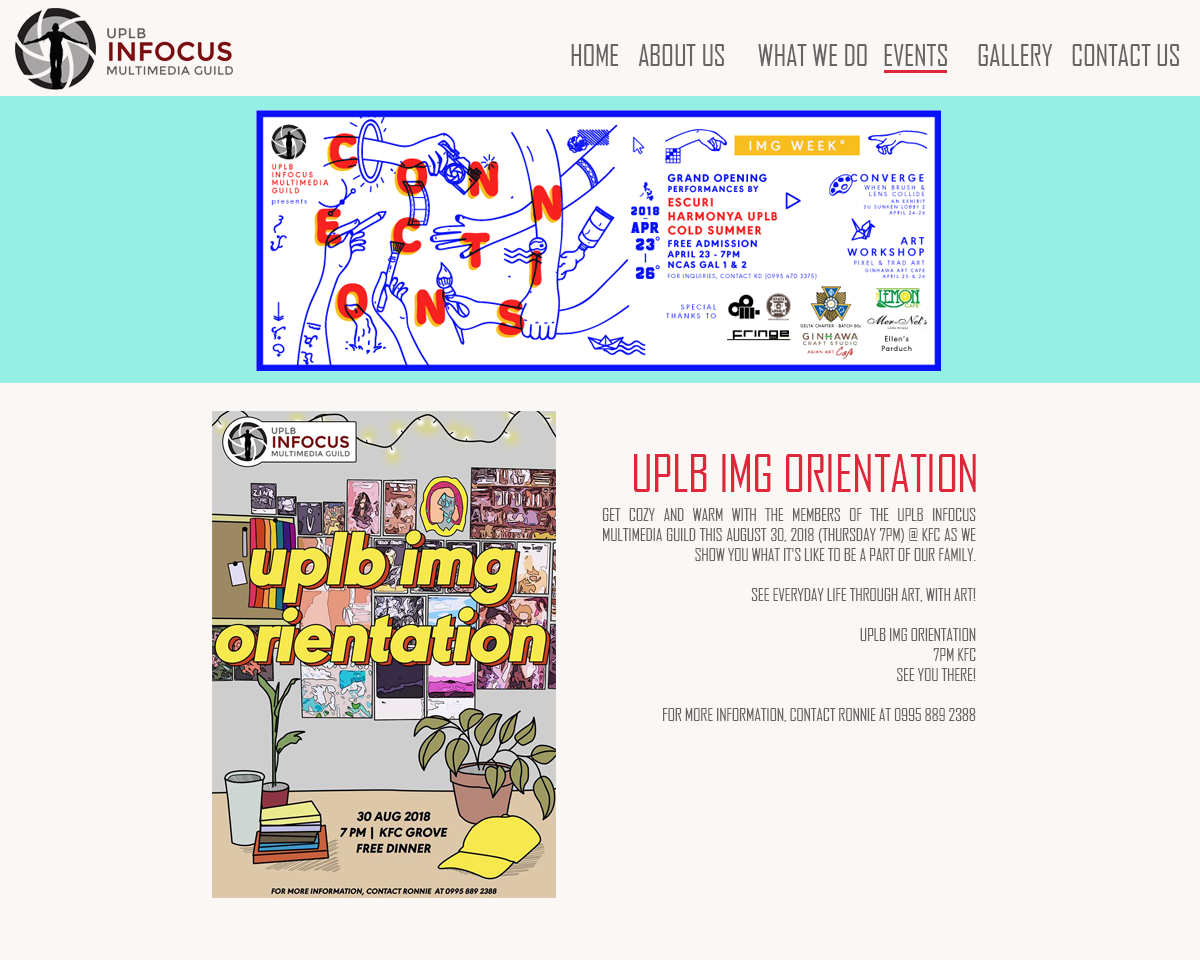
<style>
.page{position:relative;width:1200px;height:960px;background:#fbf7f5}
.page>*{position:absolute;margin:0}
.t1{font:29.3px "AgencyFB-Reg";letter-spacing:-0.01em;color:#676465;text-transform:uppercase}
.t2{font:50px "AgencyFB-Reg";letter-spacing:-0.01em;color:#df263b;text-transform:uppercase}
.t3{font:16.7px "AgencyFB-Reg";letter-spacing:-0.01em;color:#676465;text-transform:uppercase}
</style>
<div class="page">
<p class="t1" style="left:571px;top:44px;width:608px;height:22px">home   about us  what we do  events gallery contact us</p>
<p class="t2" style="left:634px;top:454px;width:342px;height:38px">UPLB IMG Orientation</p>
<p class="t3" style="left:602px;top:508px;width:374px;height:214px;text-align:justify">Get cozy and warm with the members of the UPLB INFOCUS Multimedia Guild this August 30, 2018 (Thursday 7PM) @ KFC as we show you what it's like to be a part of our family.<br><br>See everyday life through art, with art!<br><br>UPLB IMG ORIENTATION<br>7PM KFC<br>SEE YOU THERE!<br><br>for more information, contact RONNIE at 0995 889 2388</p>
</div>
